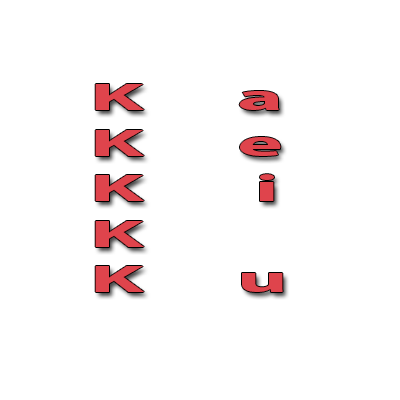
<style>
.page{position:relative;width:400px;height:400px;background:#ffffff}
.page>*{position:absolute;margin:0}
.t1{font:38px "MyriadPro-Bold";color:#df444c;scale:2.3 1}
</style>
<div class="page">
<p class="t1" style="left:95px;top:84px;width:188px;height:208px">K   a<br>K   e<br>K    i <br>K      <br>K   u</p>
</div>
